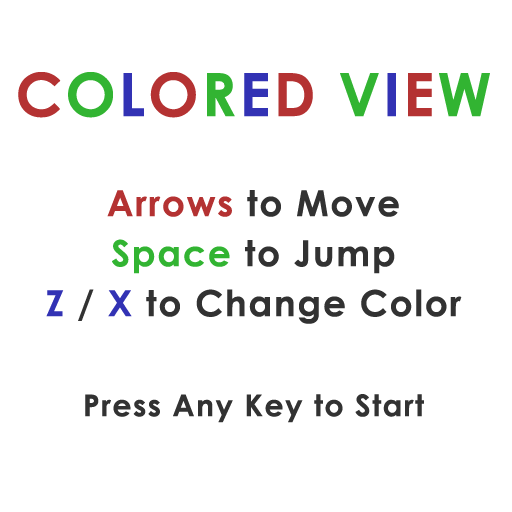
<style>
.page{position:relative;width:512px;height:512px;background:#ffffff}
.page>*{position:absolute;margin:0}
.t1{font:30px/50px "CenturyGothic-Bold";letter-spacing:0.05em;color:#323232}
.t2{font:60px/50px "CenturyGothic-Bold";letter-spacing:0.05em;color:#b43232}
.t3{font:60px/50px "CenturyGothic-Bold";letter-spacing:0.05em;color:#32b432}
.t4{font:60px/50px "CenturyGothic-Bold";letter-spacing:0.05em;color:#3232b4}
.t5{font:36px/50px "CenturyGothic-Bold";letter-spacing:0.05em;color:#b43232}
.t6{font:36px/50px "CenturyGothic-Bold";letter-spacing:0.05em;color:#323232}
.t7{font:36px/50px "CenturyGothic-Bold";letter-spacing:0.05em;color:#32b432}
.t8{font:36px/50px "CenturyGothic-Bold";letter-spacing:0.05em;color:#3232b4}
</style>
<div class="page">
<p class="t1" style="left:18px;top:72px;width:472px;height:351px;text-align:center"><span class="t2">C</span><span class="t3">O</span><span class="t4">L</span><span class="t2">O</span><span class="t3">R</span><span class="t4">E</span><span class="t2">D </span><span class="t3">V</span><span class="t4">I</span><span class="t2">E</span><span class="t3">W<br><br></span><span class="t5">Arrows</span><span class="t6"> to Move<br></span><span class="t7">Space</span><span class="t6"> to Jump<br></span><span class="t8">Z </span><span class="t6">/ </span><span class="t8">X</span><span class="t6"> to Change Color<br><br></span>Press Any Key to Start</p>
</div>
